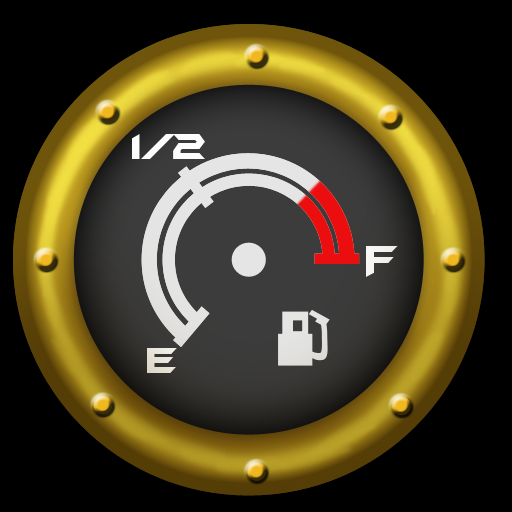
<style>
.page{position:relative;width:512px;height:512px;background:#000000}
.page>*{position:absolute;margin:0}
.t1{font:42.2px "BatmanForeverAlternate";letter-spacing:-0.075em;color:#fdfdfd}
.t2{font:44.7px "BatmanForeverAlternate";letter-spacing:-0.075em;color:#fdfdfd}
.t3{font:42.2px "BatmanForeverAlternate";letter-spacing:-0.075em;color:#e7e2d7}
</style>
<div class="page">
<p class="t1" style="left:132px;top:134px;width:73px;height:25px">1/2</p>
<p class="t2" style="left:366px;top:246px;width:32px;height:31px">F</p>
<p class="t3" style="left:147px;top:348px;width:30px;height:25px">E</p>
</div>
